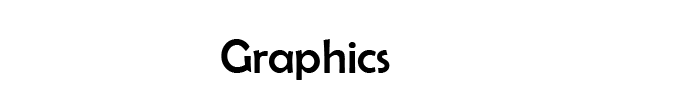
<style>
.page{position:relative;width:700px;height:100px;background:#ffffff}
.page>*{position:absolute;margin:0}
.t1{font:48px "BerlinSansFB-Reg";color:#000000}
</style>
<div class="page">
<p class="t1" style="left:221px;top:39px;width:169px;height:41px">Graphics</p>
</div>
